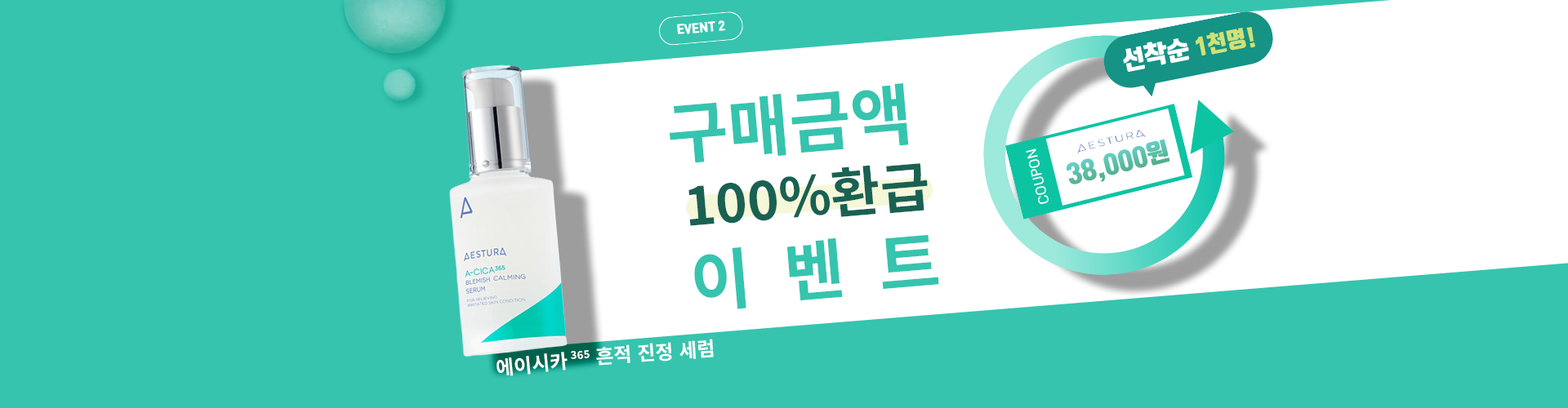
<style>
.page{position:relative;width:1568px;height:408px;background:#36c4ae}
.page>*{position:absolute;margin:0}
.t1{font:67px "NotoSansKR-Bold";color:#36c4ae}
.t2{font:53.9px "NotoSansKR-Bold";color:#196153}
.t3{font:65.3px "NotoSansKR-Bold";color:#36c4ae}
.t4{font:66.2px "NotoSansKR-Bold";color:#36c4ae}
.t5{font:19.6px "NotoSansKR-Bold";color:#ffffff}
.t6{font:10.6px "NotoSansKR-Bold";color:#ffffff}
</style>
<div class="page">
<p class="t1" style="left:670px;top:83px;width:239px;height:80px;rotate:-5deg">구매금액</p>
<p class="t2" style="left:688px;top:163px;width:240px;height:63px;rotate:-5deg">100%환급</p>
<p class="t3" style="left:786px;top:238px;width:57px;height:63px;rotate:-5deg">벤</p>
<p class="t1" style="left:882px;top:234px;width:57px;height:55px;rotate:-5deg">트</p>
<p class="t4" style="left:694px;top:247px;width:52px;height:63px;rotate:-5deg">이</p>
<p class="t5" style="left:596px;top:339px;width:118px;height:27px;rotate:-4deg">흔적 진정 세럼</p>
<p class="t5" style="left:497px;top:352px;width:71px;height:24px;rotate:-5deg">에이시카</p>
<p class="t6" style="left:571px;top:350px;width:19px;height:9px;rotate:-5deg">365</p>
</div>
